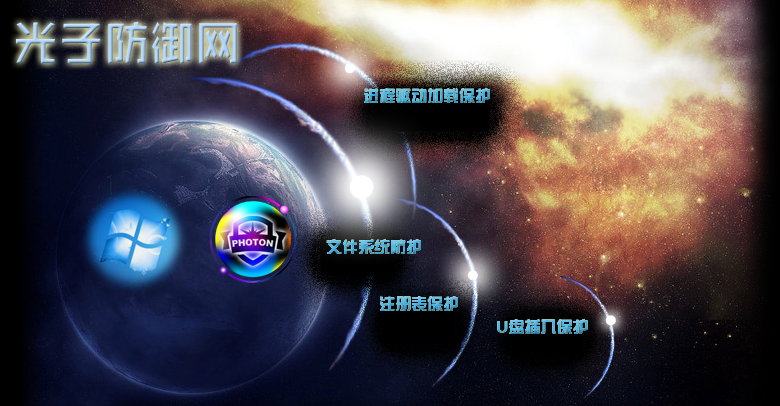
<style>
.page{position:relative;width:780px;height:406px}
.page>*{position:absolute;margin:0}
.t1{font:50.5px "ZHSRXT--GBK1-0";scale:0.9 1}
.t2{font:16px "FZZYJW--GB1-0"}
</style>
<div class="page">
<p class="t1" style="left:16px;top:21px;width:221px;height:43px">光子防御网</p>
<p class="t2" style="left:364px;top:88px;width:126px;height:15px">进程驱动加载保护</p>
<p class="t2" style="left:326px;top:239px;width:95px;height:15px">文件系统防护</p>
<p class="t2" style="left:380px;top:296px;width:78px;height:15px">注册表保护</p>
<p class="t2" style="left:497px;top:319px;width:91px;height:15px">U盘插入保护</p>
</div>
